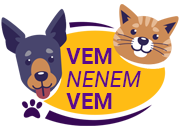
<style>
.page{position:relative;width:180px;height:130px;background:#ffffff}
.page>*{position:absolute;margin:0}
.t1{font:22.4px/22.4px "Roboto-Italic";color:#5b098d}
.t2{font:22.4px/22.4px "Roboto-Bold";color:#5b098d}
</style>
<div class="page">
<p class="t1" style="left:66px;top:48px;width:75px;height:61px"><span class="t2">VEM<br></span>NENEM<br><span class="t2">VEM</span></p>
</div>
